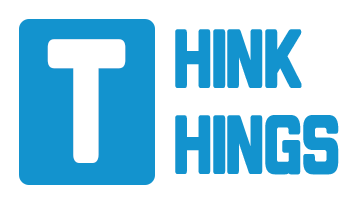
<style>
.page{position:relative;width:360px;height:198px;background:#ffffff}
.page>*{position:absolute;margin:0}
.t1{font:72px/86px "TypoSsangmundongGulimB";letter-spacing:-0.03em;color:#1393ce;font-weight:bold;scale:0.7 1}
.t2{font:150px "TypoSsangmundongGulimB";letter-spacing:-0.03em;color:#ffffff;font-weight:bold;scale:0.7 1}
</style>
<div class="page">
<p class="t1" style="left:175px;top:29px;width:164px;height:146px">HINK<br>HINGS</p>
<p class="t2" style="left:47px;top:39px;width:79px;height:124px">T</p>
</div>
